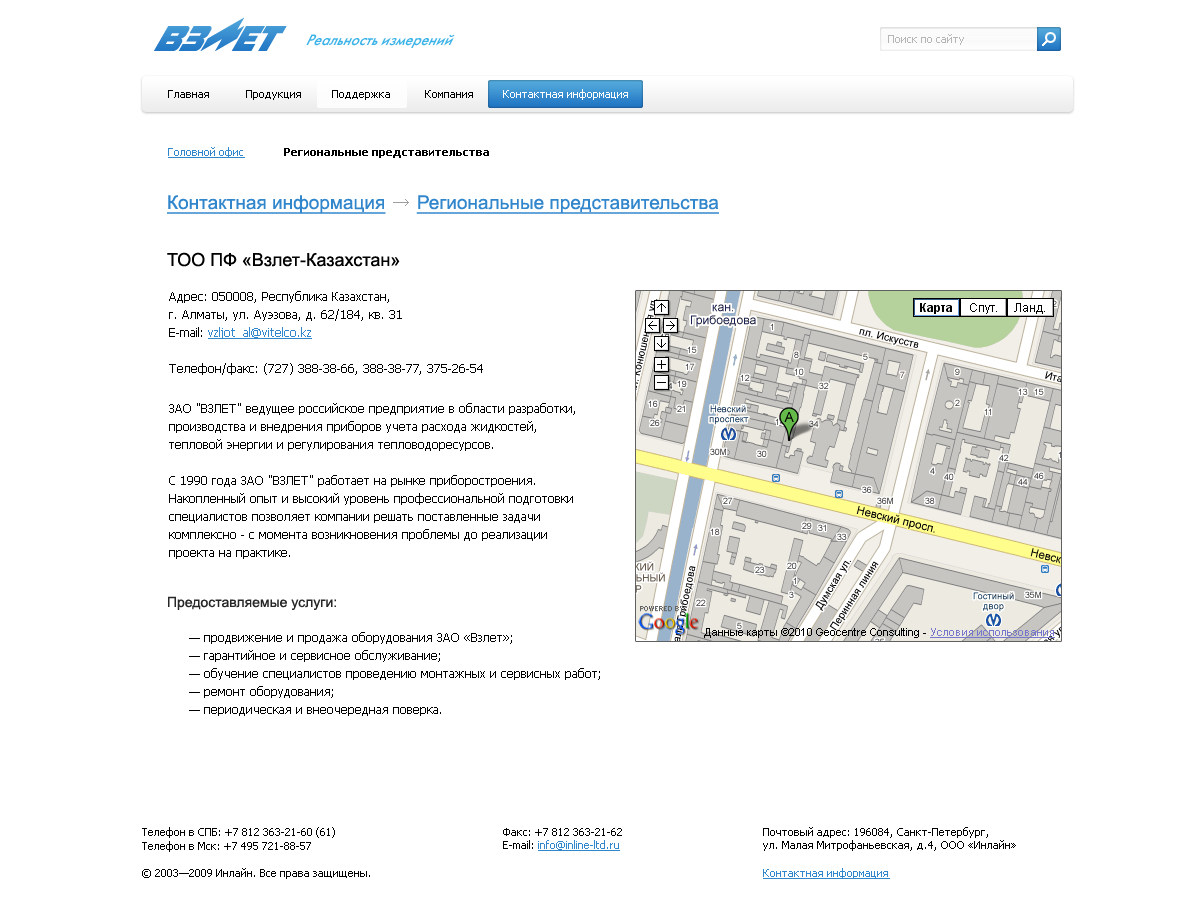
<style>
.page{position:relative;width:1200px;height:919px;background:#ffffff}
.page>*{position:absolute;margin:0}
.t1{font:16px "FuturisC-Italic";color:#3cb3e8;scale:0.94 1}
.t2{font:11px "Tahoma";color:#b7b6b6}
.t3{font:11px "Tahoma";color:#ffffff}
.t4{font:11px "Tahoma";color:#000000}
.t5{font:11px "Tahoma";color:#3287cc;text-decoration:underline}
.t6{font:11px "Tahoma-Bold";color:#000000}
.t7{font:19px "ArialMT";color:#3287cc;text-decoration:underline}
.t8{font:18px "ArialMT";color:#000000}
.t9{font:12px/18px "Tahoma";color:#000000}
.t10{font:12px/18px "Tahoma";color:#3287cc;text-decoration:underline}
.t11{font:14px "ArialMT";color:#272727}
.t12{font:15px "Arial-BoldMT";color:#000000}
</style>
<div class="page">
<p class="t1" style="left:306px;top:34px;width:149px;height:14px">Реальность измерений</p>
<p class="t2" style="left:888px;top:34px;width:76px;height:11px">Поиск по сайту</p>
<p class="t3" style="left:503px;top:89px;width:125px;height:11px">Контактная информация</p>
<p class="t4" style="left:168px;top:90px;width:41px;height:8px">Главная</p>
<p class="t4" style="left:246px;top:90px;width:55px;height:10px">Продукция</p>
<p class="t4" style="left:332px;top:90px;width:58px;height:10px">Поддержка</p>
<p class="t4" style="left:425px;top:90px;width:48px;height:8px">Компания</p>
<p class="t5" style="left:168px;top:147px;width:77px;height:11px">Головной офис</p>
<p class="t6" style="left:284px;top:148px;width:205px;height:10px">Региональные представительства</p>
<p class="t7" style="left:167px;top:195px;width:552px;height:19px">Контактная информация      Региональные представительства</p>
<p class="t8" style="left:167px;top:252px;width:233px;height:15px">ТОО ПФ «Взлет-Казахстан»</p>
<p class="t9" style="left:169px;top:291px;width:314px;height:84px">Адрес: 050008, Республика Казахстан,<br>г. Алматы, ул. Ауэзова, д. 62/184, кв. 31<br>E-mail: <span class="t10">vzljot_al@vitelco.kz<br></span><br>Телефон/факс: (727) 388-38-66, 388-38-77, 375-26-54</p>
<p class="t9" style="left:169px;top:403px;width:406px;height:156px">ЗАО "ВЗЛЕТ" ведущее российское предприятие в области разработки, производства и внедрения приборов учета расхода жидкостей, тепловой энергии и регулирования тепловодоресурсов.<br><br>С 1990 года ЗАО "ВЗЛЕТ" работает на рынке приборостроения. Накопленный опыт и высокий уровень профессиональной подготовки специалистов позволяет компании решать поставленные задачи комплексно - с момента возникновения проблемы до реализации проекта на практике.</p>
<p class="t11" style="left:168px;top:596px;width:168px;height:14px">Предоставляемые услуги:</p>
<p class="t9" style="left:189px;top:632px;width:411px;height:84px">— продвижение и продажа оборудования ЗАО «Взлет»;<br>— гарантийное и сервисное обслуживание;<br>— обучение специалистов проведению монтажных и сервисных работ;<br>— ремонт оборудования;<br>— периодическая и внеочередная поверка.</p>
<p class="t4" style="left:142px;top:827px;width:193px;height:25px">Телефон в СПБ: +7 812 363-21-60 (61)<br>Телефон в Мск: +7 495 721-88-57</p>
<p class="t4" style="left:503px;top:828px;width:119px;height:23px"><span class="t12"><br><br></span>Факс: +7 812 363-21-62<br>E-mail: <span class="t5">info@inline-ltd.ru</span></p>
<p class="t4" style="left:763px;top:827px;width:253px;height:24px"><span class="t12"><br><br></span>Почтовый адрес: 196084, Санкт-Петербург,<br>ул. Малая Митрофаньевская, д.4, ООО «Инлайн»</p>
<p class="t4" style="left:142px;top:868px;width:228px;height:11px">© 2003—2009 Инлайн. Все права защищены.</p>
<p class="t5" style="left:763px;top:868px;width:127px;height:11px">Контактная информация</p>
</div>
